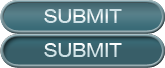
<style>
.page{position:relative;width:165px;height:68px}
.page>*{position:absolute;margin:0}
.t1{font:20px "HelveticaNeueLTCom-Roman";scale:1.03 1}
</style>
<div class="page">
<p class="t1" style="left:44px;top:9px;width:78px;height:14px">SUBMIT</p>
<p class="t1" style="left:44px;top:43px;width:78px;height:14px">SUBMIT</p>
</div>
